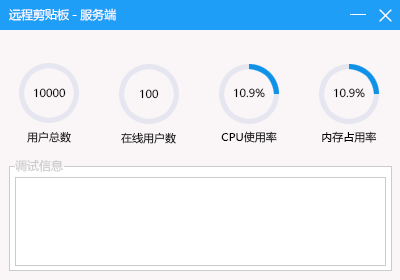
<style>
.page{position:relative;width:400px;height:280px;background:#faf6f7}
.page>*{position:absolute;margin:0}
.t1{font:12px "MicrosoftYaHei";color:#ffffff}
.t2{font:10.8px "MicrosoftYaHei";color:#000000}
.t3{font:10.8px "MicrosoftYaHei"}
.t4{font:11px "MicrosoftYaHei";color:#000000}
.t5{font:12px "MicrosoftYaHei";color:#cccccc}
</style>
<div class="page">
<p class="t1" style="left:9px;top:8px;width:108px;height:13px">远程剪贴板-服务端</p>
<p class="t2" style="left:34px;top:88px;width:32px;height:10px">10000</p>
<p class="t2" style="left:140px;top:89px;width:19px;height:10px">100</p>
<p class="t2" style="left:234px;top:88px;width:31px;height:10px">10.9%</p>
<p class="t2" style="left:334px;top:88px;width:31px;height:10px">10.9%</p>
<p class="t3" style="left:27px;top:131px;width:44px;height:12px">用户总数</p>
<p class="t2" style="left:121px;top:132px;width:55px;height:12px">在线用户数</p>
<p class="t4" style="left:221px;top:131px;width:56px;height:12px">CPU使用率</p>
<p class="t4" style="left:322px;top:131px;width:55px;height:12px">内存占用率</p>
<p class="t5" style="left:15px;top:160px;width:48px;height:12px">调试信息</p>
</div>
